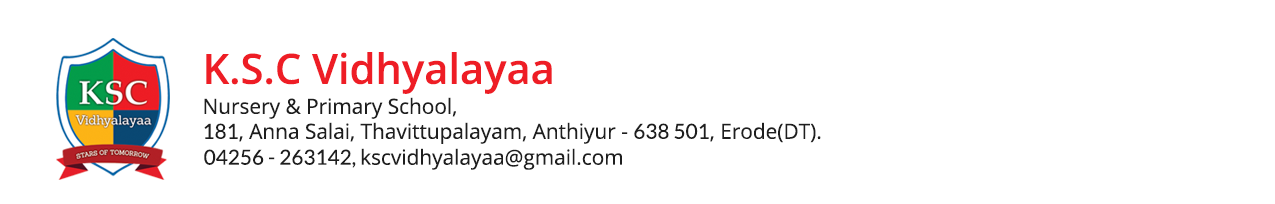
<style>
.page{position:relative;width:1275px;height:204px;background:#ffffff}
.page>*{position:absolute;margin:0}
.t1{font:20.8px "OpenSans";color:#1e1e1e}
.t2{font:41.7px/58.3px "OpenSans-Semibold";color:#ee1d25}
.t3{font:20.8px/30px "OpenSans";color:#1e1e1e}
.t4{font:20.8px "Lato-Regular";color:#1e1e1e}
</style>
<div class="page">
<p class="t1" style="left:204px;top:52px;width:617px;height:92px"><span class="t2">K.S.C Vidhyalayaa <br></span><span class="t3">Nursery &amp; Primary School, <br></span><span class="t4">181</span>, Anna Salai, Thavittupalayam, Anthiyur - <span class="t4">638 501</span>, Erode(DT).</p>
<p class="t1" style="left:204px;top:148px;width:418px;height:22px"><span class="t4">04256 - 263142, </span>kscvidhyalayaa@gmail.com</p>
</div>
